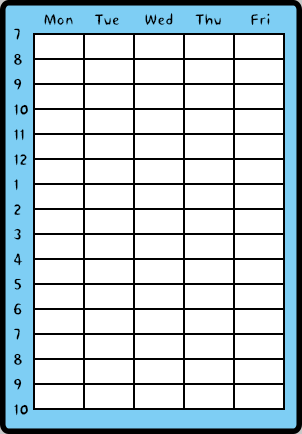
<style>
.page{position:relative;width:302px;height:434px;background:#ffffff}
.page>*{position:absolute;margin:0}
.t1{font:18px "PNHCartoon";color:#000000}
.t2{font:18px/25px "PNHCartoon";color:#000000}
</style>
<div class="page">
<p class="t1" style="left:44px;top:13px;width:226px;height:12px">Mon     Tue      Wed     Thu       Fri</p>
<p class="t2" style="left:13px;top:28px;width:15px;height:388px">7<br>8<br>9<br>10<br>11<br>12<br>1<br>2<br>3<br>4<br>5<br>6<br>7<br>8<br>9<br>10</p>
</div>
